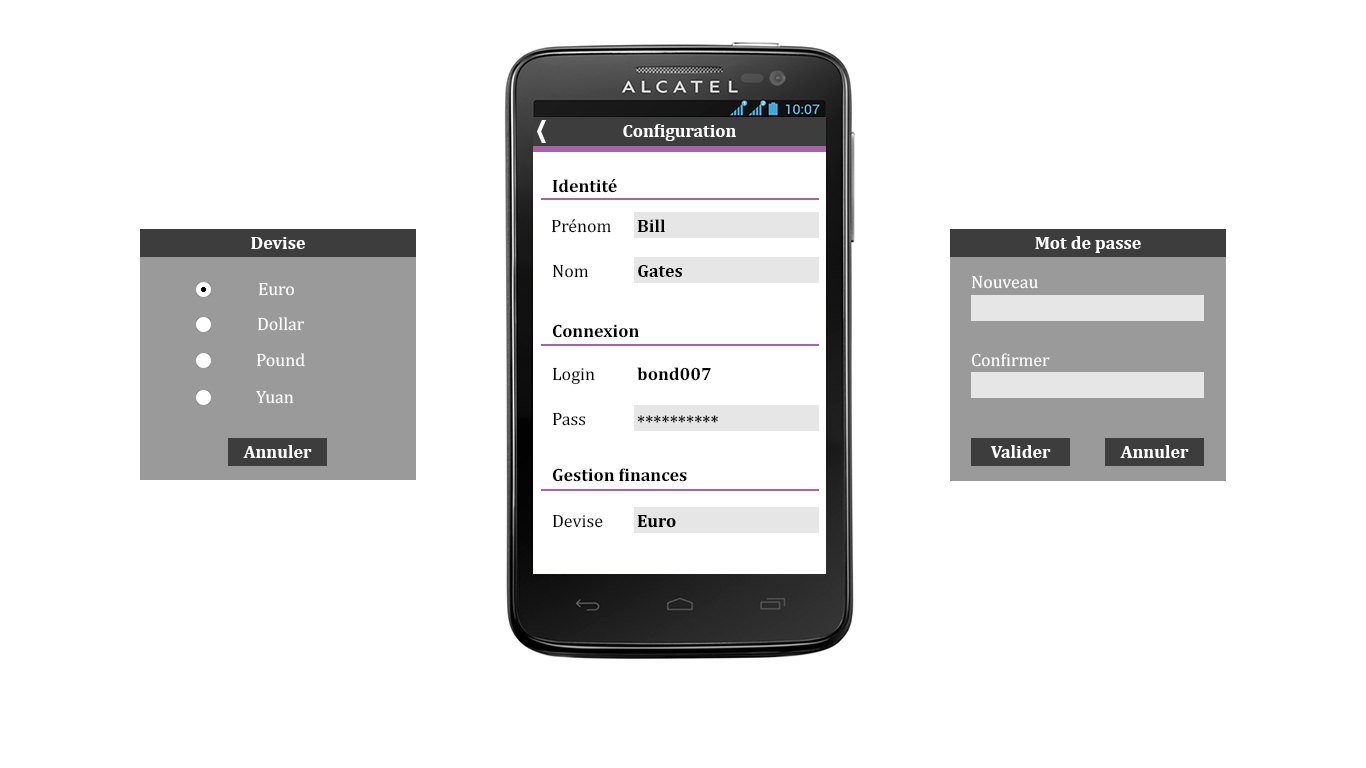
<style>
.page{position:relative;width:1366px;height:768px;background:#ffffff}
.page>*{position:absolute;margin:0}
.t1{font:18px "Cambria-Bold";color:#ffffff}
.t2{font:18px "Cambria-Bold";color:#000000}
.t3{font:18px "Cambria";color:#000000}
.t4{font:18px "Cambria";color:#ffffff}
</style>
<div class="page">
<p class="t1" style="left:623px;top:124px;width:113px;height:17px">Configuration</p>
<p class="t2" style="left:552px;top:179px;width:65px;height:14px">Identité</p>
<p class="t3" style="left:552px;top:219px;width:59px;height:14px">Prénom</p>
<p class="t2" style="left:637px;top:219px;width:28px;height:13px">Bill</p>
<p class="t1" style="left:251px;top:237px;width:54px;height:12px">Devise</p>
<p class="t1" style="left:1035px;top:236px;width:106px;height:17px">Mot de passe</p>
<p class="t3" style="left:553px;top:264px;width:35px;height:14px">Nom</p>
<p class="t2" style="left:638px;top:265px;width:44px;height:12px">Gates</p>
<p class="t4" style="left:972px;top:275px;width:66px;height:14px">Nouveau</p>
<p class="t4" style="left:259px;top:282px;width:35px;height:14px">Euro</p>
<p class="t4" style="left:258px;top:317px;width:47px;height:14px">Dollar</p>
<p class="t2" style="left:553px;top:324px;width:86px;height:14px">Connexion</p>
<p class="t4" style="left:257px;top:353px;width:48px;height:14px">Pound</p>
<p class="t4" style="left:971px;top:353px;width:79px;height:14px">Confirmer</p>
<p class="t3" style="left:553px;top:367px;width:42px;height:18px">Login</p>
<p class="t2" style="left:637px;top:367px;width:74px;height:14px">bond007</p>
<p class="t4" style="left:256px;top:390px;width:38px;height:14px">Yuan</p>
<p class="t3" style="left:553px;top:412px;width:33px;height:14px">Pass</p>
<p class="t2" style="left:637px;top:415px;width:81px;height:8px">**********</p>
<p class="t1" style="left:243px;top:445px;width:69px;height:13px">Annuler</p>
<p class="t1" style="left:990px;top:445px;width:61px;height:13px">Valider</p>
<p class="t1" style="left:1120px;top:445px;width:69px;height:13px">Annuler</p>
<p class="t2" style="left:553px;top:468px;width:134px;height:14px">Gestion finances</p>
<p class="t3" style="left:553px;top:514px;width:50px;height:14px">Devise</p>
</div>
